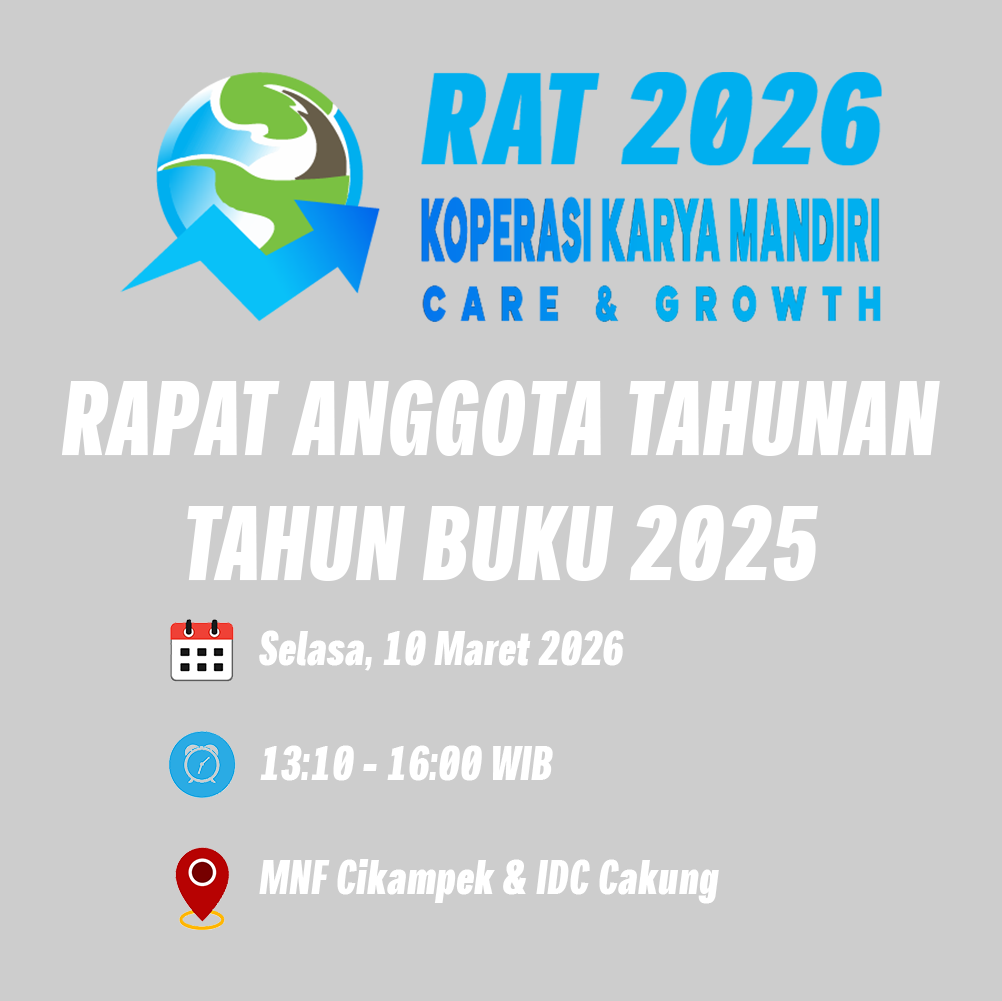
<style>
.page{position:relative;width:1002px;height:1001px;background:#cdcdcd}
.page>*{position:absolute;margin:0}
.t1{font:104.8px "KalbeSystemCond-ExtraBoldItalic";color:#ffffff}
.t2{font:47.7px "KalbeSystemCond-ExtraBoldItalic";color:#ffffff}
</style>
<div class="page">
<p class="t1" style="left:61px;top:380px;width:879px;height:201px;text-align:center">RAPAT ANGGOTA TAHUNAN<br>TAHUN BUKU 2025</p>
<p class="t2" style="left:259px;top:630px;width:460px;height:274px">Selasa, 10 Maret 2026<br><br>13:10 - 16:00 WIB<br><br>MNF Cikampek &amp; IDC Cakung</p>
</div>
